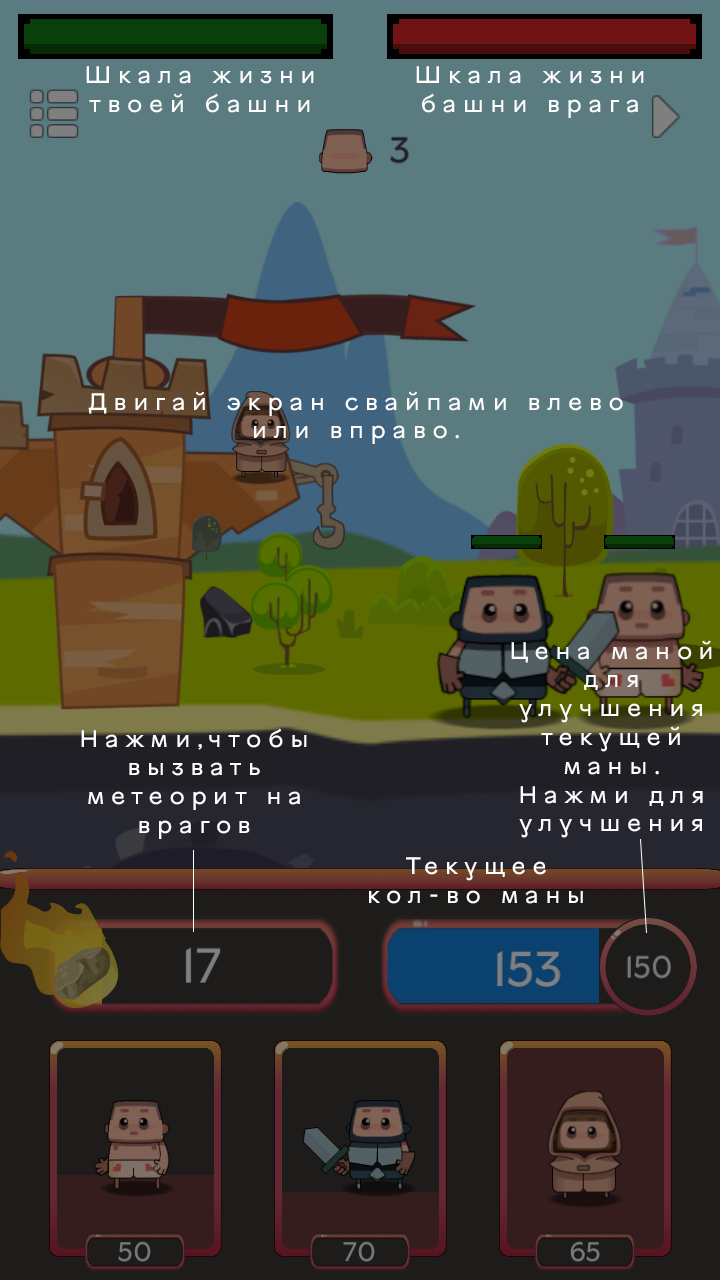
<style>
.page{position:relative;width:720px;height:1280px;background:#5a7b7f}
.page>*{position:absolute;margin:0}
.t1{font:24px "VinnytsiaSansReg";letter-spacing:0.28em;color:#ffffff}
</style>
<div class="page">
<p class="t1" style="left:86px;top:66px;width:228px;height:47px;text-align:center">Шкала жизни твоей башни</p>
<p class="t1" style="left:416px;top:66px;width:228px;height:52px;text-align:center">Шкала жизни башни врага</p>
<p class="t1" style="left:88px;top:391px;width:535px;height:53px;text-align:center">Двигай экран свайпами влево или вправо.</p>
<p class="t1" style="left:511px;top:640px;width:201px;height:198px;text-align:center">Цена маной для улучшения текущей маны.<br>Нажми для улучшения</p>
<p class="t1" style="left:81px;top:728px;width:226px;height:111px;text-align:center">Нажми,чтобы вызвать метеорит на врагов</p>
<p class="t1" style="left:369px;top:857px;width:214px;height:47px;text-align:center">Текущее кол-во маны</p>
</div>
